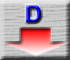
<style>
.page{position:relative;width:70px;height:60px}
.page>*{position:absolute;margin:0}
.t1{font:24px "Arial-BoldMT"}
</style>
<div class="page">
<p class="t1" style="left:26px;top:5px;width:15px;height:18px">D</p>
</div>
